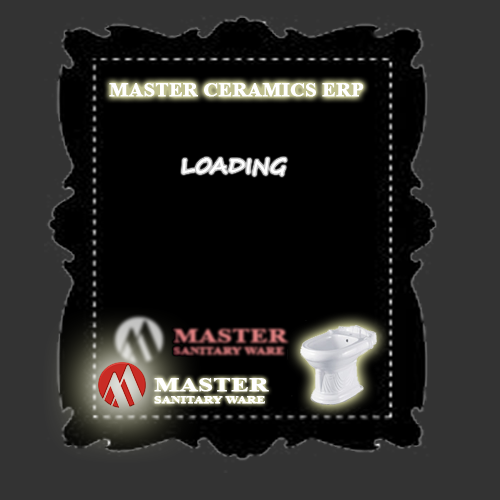
<style>
.page{position:relative;width:500px;height:500px;background:#333333}
.page>*{position:absolute;margin:0}
.t1{font:20px "TimesNewRomanPS-BoldMT";color:#ffffff;text-transform:uppercase;font-weight:bold}
.t2{font:20px "SegoeScript";color:#ffffff;text-transform:uppercase;font-weight:bold}
.t3{font:9.9px "TimesNewRomanPS-BoldMT";color:#ffffff;text-transform:uppercase;font-weight:bold;scale:1.3 1}
.t4{font:19.7px "TimesNewRomanPS-BoldMT";color:#ffffff;text-transform:uppercase;font-weight:bold;scale:1.3 1}
</style>
<div class="page">
<p class="t1" style="left:109px;top:83px;width:255px;height:14px">master Ceramics ERP</p>
<p class="t2" style="left:182px;top:158px;width:105px;height:18px">Loading</p>
<p class="t3" style="left:154px;top:378px;width:115px;height:26px"><span class="t4">Master <br></span>sanitary ware</p>
</div>
